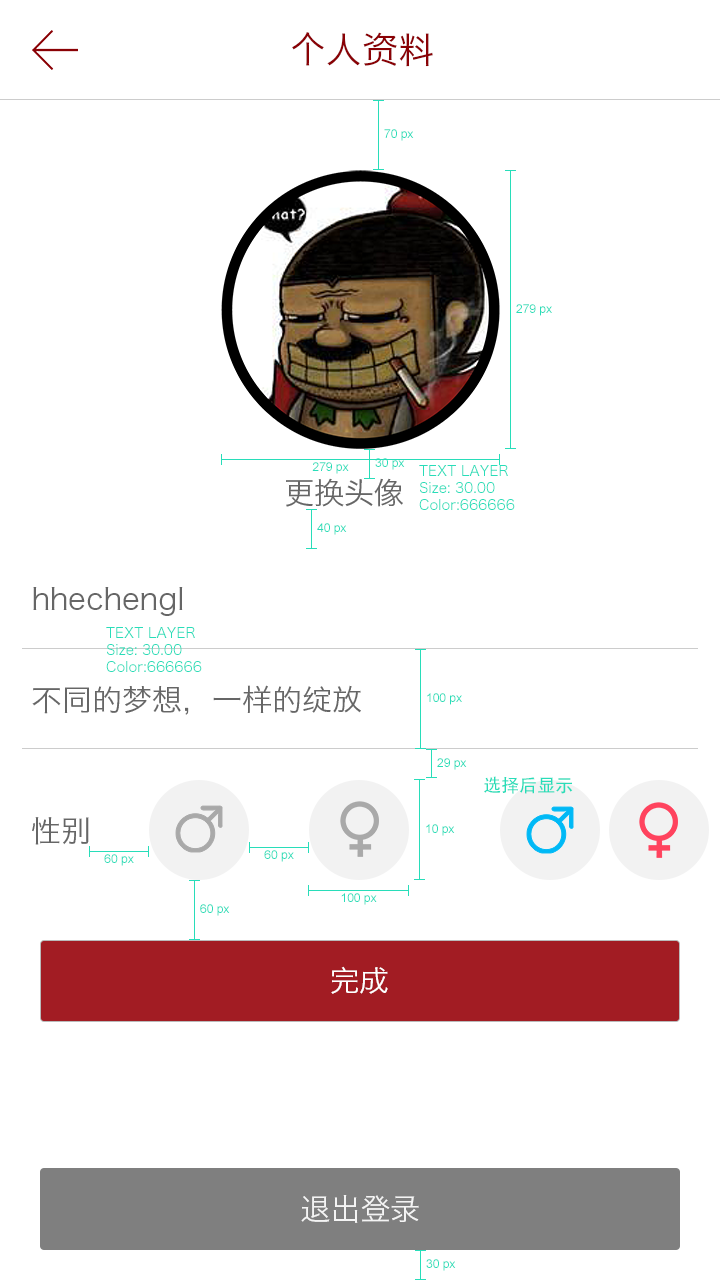
<style>
.page{position:relative;width:720px;height:1280px;background:#ffffff}
.page>*{position:absolute;margin:0}
.t1{font:36px "HiraginoSansGB-W3";color:#8a0105}
.t2{font:12px "ArialMT";color:#28ddb9}
.t3{font:14px "HiraginoSansGB-W3";color:#28ddb9}
.t4{font:30px "HiraginoSansGB-W3";color:#666666}
.t5{font:18px "AdobeHeitiStd-Regular";color:#28ddb9}
.t6{font:30px "HiraginoSansGB-W3";color:#ffffff}
</style>
<div class="page">
<p class="t1" style="left:292px;top:32px;width:141px;height:35px">个人资料</p>
<p class="t2" style="left:384px;top:129px;width:30px;height:12px">70 px</p>
<p class="t2" style="left:516px;top:304px;width:36px;height:12px">279 px</p>
<p class="t2" style="left:312px;top:462px;width:37px;height:12px">279 px</p>
<p class="t2" style="left:375px;top:458px;width:30px;height:12px">30 px</p>
<p class="t3" style="left:419px;top:465px;width:96px;height:45px">TEXT LAYER<br>Size: 30.00<br>Color:666666</p>
<p class="t4" style="left:286px;top:478px;width:117px;height:29px">更换头像</p>
<p class="t2" style="left:317px;top:523px;width:30px;height:12px">40 px</p>
<p class="t4" style="left:33px;top:587px;width:150px;height:29px">hhechengl</p>
<p class="t3" style="left:106px;top:627px;width:96px;height:45px">TEXT LAYER<br>Size: 30.00<br>Color:666666</p>
<p class="t4" style="left:32px;top:685px;width:329px;height:30px">不同的梦想，一样的绽放</p>
<p class="t2" style="left:427px;top:693px;width:35px;height:12px">100 px</p>
<p class="t2" style="left:437px;top:758px;width:30px;height:12px">29 px</p>
<p class="t5" style="left:484px;top:776px;width:89px;height:18px">选择后显示</p>
<p class="t4" style="left:32px;top:817px;width:57px;height:28px">性别</p>
<p class="t2" style="left:426px;top:824px;width:29px;height:12px">10 px</p>
<p class="t2" style="left:104px;top:854px;width:30px;height:12px">60 px</p>
<p class="t2" style="left:264px;top:850px;width:30px;height:12px">60 px</p>
<p class="t2" style="left:341px;top:893px;width:36px;height:12px">100 px</p>
<p class="t2" style="left:200px;top:904px;width:30px;height:12px">60 px</p>
<p class="t6" style="left:331px;top:966px;width:57px;height:28px">完成</p>
<p class="t6" style="left:301px;top:1195px;width:118px;height:28px;opacity:0.9">退出登录</p>
<p class="t2" style="left:426px;top:1259px;width:30px;height:12px">30 px</p>
</div>
